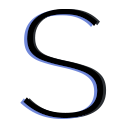
<style>
.page{position:relative;width:128px;height:128px;background:#ffffff}
.page>*{position:absolute;margin:0}
.t1{font:150px "RalewayRoman_222.000wght"}
.t2{font:150px "RalewayRoman_222.000wght";color:#000000}
.t3{font:150px "RalewayRoman_178.000wght";color:#000000}
</style>
<div class="page">
<p class="t1" style="left:20px;top:10px;width:81px;height:109px">S</p>
<p class="t2" style="left:23px;top:9px;width:81px;height:109px">S</p>
<p class="t3" style="left:26px;top:9px;width:81px;height:109px">S</p>
</div>
